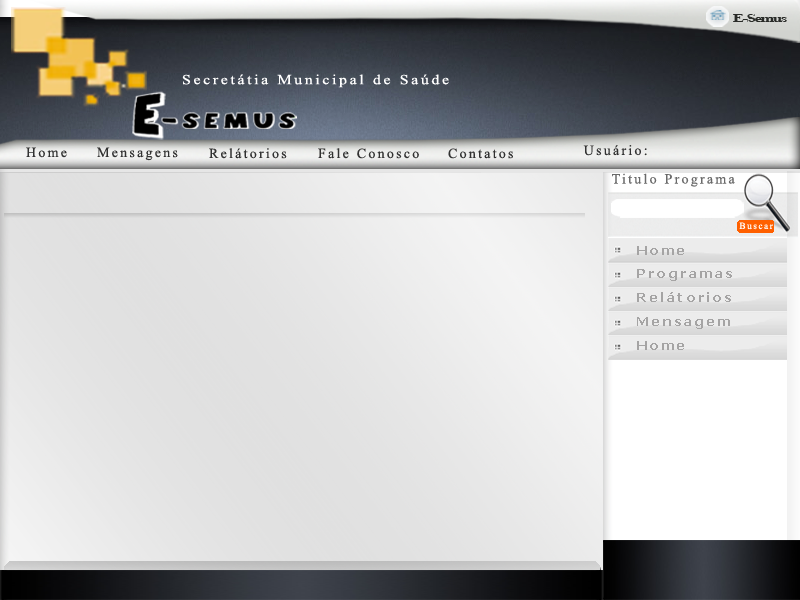
<style>
.page{position:relative;width:800px;height:600px}
.page>*{position:absolute;margin:0}
.t1{font:10.7px "TimesNewRomanPS-BoldMT";letter-spacing:-0.1em;color:#292b28;scale:1.6 1}
.t2{font:14px "TimesNewRomanPSMT";letter-spacing:0.16em;color:#ffffff;scale:1.14 1}
.t3{font:14px "TimesNewRomanPSMT";letter-spacing:0.16em;color:#323232}
.t4{font:14px "TimesNewRomanPSMT";letter-spacing:0.16em;color:#6a6a6a}
.t5{font:9.4px "TimesNewRomanPSMT";letter-spacing:0.16em;color:#ffffff}
.t6{font:13px "Tahoma-Bold";letter-spacing:0.16em;color:#a5a4a4;scale:1.1 1}
</style>
<div class="page">
<p class="t1" style="left:733px;top:14px;width:54px;height:8px">E-Semus</p>
<p class="t2" style="left:182px;top:74px;width:267px;height:14px">Secretátia Municipal de Saúde</p>
<p class="t3" style="left:26px;top:147px;width:41px;height:11px">Home</p>
<p class="t3" style="left:97px;top:147px;width:81px;height:14px">Mensagens</p>
<p class="t3" style="left:209px;top:148px;width:78px;height:11px">Relátorios</p>
<p class="t3" style="left:318px;top:148px;width:101px;height:11px">Fale Conosco</p>
<p class="t3" style="left:448px;top:148px;width:65px;height:11px">Contatos</p>
<p class="t3" style="left:583px;top:145px;width:64px;height:11px">Usuário:</p>
<p class="t4" style="left:612px;top:173px;width:123px;height:14px">Titulo Programa</p>
<p class="t5" style="left:739px;top:222px;width:34px;height:8px">Buscar</p>
<p class="t6" style="left:637px;top:246px;width:47px;height:9px">Home</p>
<p class="t6" style="left:637px;top:269px;width:95px;height:12px">Programas</p>
<p class="t6" style="left:637px;top:292px;width:94px;height:10px">Relátorios</p>
<p class="t6" style="left:637px;top:317px;width:93px;height:12px">Mensagem</p>
<p class="t6" style="left:637px;top:341px;width:47px;height:9px">Home</p>
</div>
